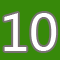
<style>
.page{position:relative;width:60px;height:60px;background:#37890a}
.page>*{position:absolute;margin:0}
.t1{font:50px "MicrosoftYaHei";color:#ffffff}
</style>
<div class="page">
<p class="t1" style="left:4px;top:13px;width:53px;height:38px">10</p>
</div>
